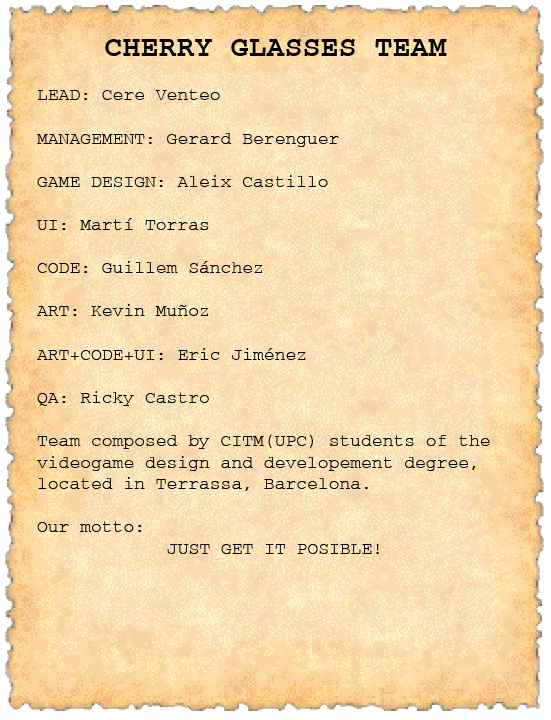
<style>
.page{position:relative;width:551px;height:720px}
.page>*{position:absolute;margin:0}
.t1{font:30px "Courant-Bold";color:#000000}
.t2{font:18px "Courant";color:#000000}
</style>
<div class="page">
<p class="t1" style="left:105px;top:39px;width:342px;height:17px">CHERRY GLASSES TEAM</p>
<p class="t2" style="left:37px;top:89px;width:453px;height:465px">LEAD: Cere Venteo<br><br>MANAGEMENT: Gerard Berenguer<br><br>GAME DESIGN: Aleix Castillo<br><br>UI: Martí Torras<br><br>CODE: Guillem Sánchez<br><br>ART: Kevin Muñoz<br><br>ART+CODE+UI: Eric Jiménez<br><br>QA: Ricky Castro<br><br>Team composed by CITM(UPC) students of the videogame design and developement degree, located in Terrassa, Barcelona.<br><br>Our motto:<br>JUST GET IT POSIBLE!</p>
</div>
